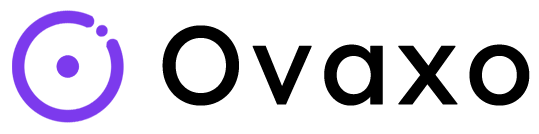
<style>
.page{position:relative;width:539px;height:134px;background:#ffffff}
.page>*{position:absolute;margin:0}
.t1{font:110px "Lexend-Regular";letter-spacing:0.035em;color:#000000;font-weight:bold}
</style>
<div class="page">
<p class="t1" style="left:162px;top:25px;width:368px;height:81px">Ovaxo</p>
</div>
